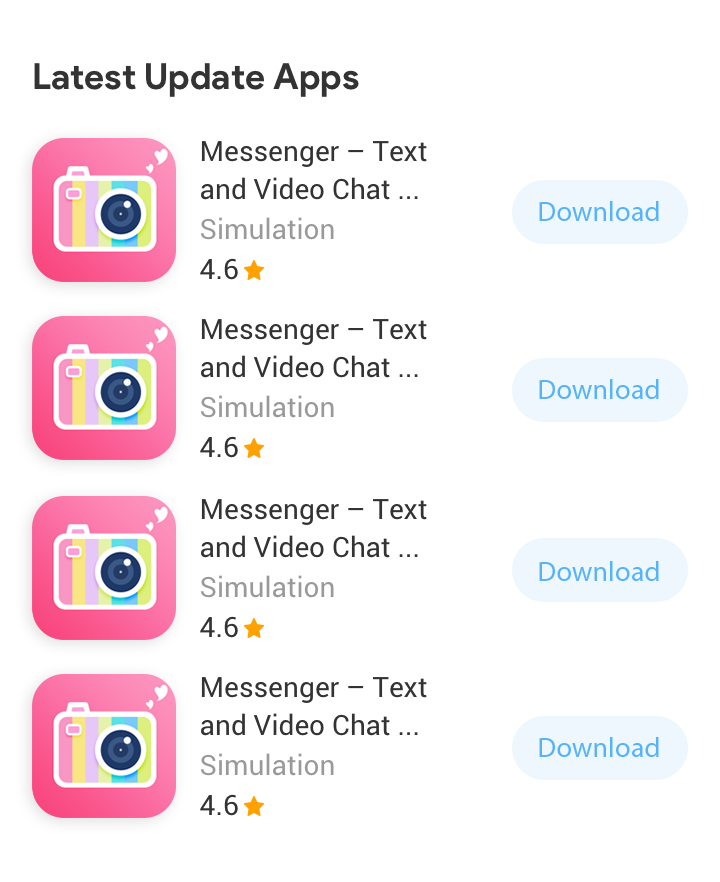
<style>
.page{position:relative;width:720px;height:882px;background:#ffffff}
.page>*{position:absolute;margin:0}
.t1{font:36px "ProductSans-Bold";color:#333333}
.t2{font:28px/37.7px "Roboto-Regular";color:#333333}
.t3{font:28px "MyriadPro-Regular";color:#56b3fa}
.t4{font:28px "Roboto-Regular";color:#999999}
.t5{font:28px "Roboto-Regular";color:#333333}
</style>
<div class="page">
<p class="t1" style="left:34px;top:63px;width:325px;height:34px">Latest Update Apps</p>
<p class="t2" style="left:201px;top:141px;width:226px;height:59px">Messenger – Text <br>and Video Chat ...</p>
<p class="t3" style="left:539px;top:201px;width:120px;height:20px">Download</p>
<p class="t4" style="left:200px;top:217px;width:134px;height:23px">Simulation</p>
<p class="t5" style="left:200px;top:258px;width:38px;height:22px">4.6</p>
<p class="t2" style="left:201px;top:319px;width:226px;height:59px">Messenger – Text <br>and Video Chat ...</p>
<p class="t3" style="left:539px;top:379px;width:120px;height:20px">Download</p>
<p class="t4" style="left:200px;top:395px;width:134px;height:23px">Simulation</p>
<p class="t5" style="left:200px;top:436px;width:38px;height:22px">4.6</p>
<p class="t2" style="left:201px;top:499px;width:226px;height:59px">Messenger – Text <br>and Video Chat ...</p>
<p class="t3" style="left:539px;top:561px;width:120px;height:20px">Download</p>
<p class="t4" style="left:200px;top:575px;width:134px;height:23px">Simulation</p>
<p class="t5" style="left:200px;top:616px;width:38px;height:22px">4.6</p>
<p class="t2" style="left:201px;top:677px;width:226px;height:59px">Messenger – Text <br>and Video Chat ...</p>
<p class="t3" style="left:539px;top:737px;width:120px;height:20px">Download</p>
<p class="t4" style="left:200px;top:753px;width:134px;height:23px">Simulation</p>
<p class="t5" style="left:200px;top:794px;width:38px;height:22px">4.6</p>
</div>
